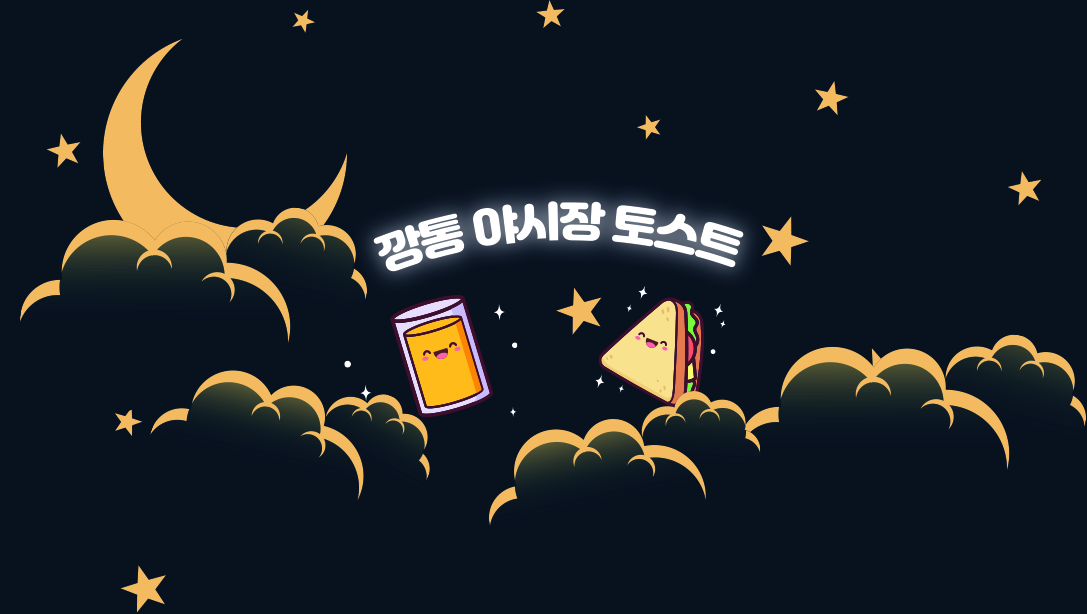
<style>
.page{position:relative;width:1087px;height:614px;background:#08111e}
.page>*{position:absolute;margin:0}
.t1{font:41.7px/69.7px "JalnanOTF";letter-spacing:-0.05em;color:#ffffff}
</style>
<div class="page">
<p class="t1" style="left:373px;top:201px;width:371px;height:71px;text-align:center">깡통 야시장 토스트</p>
</div>
